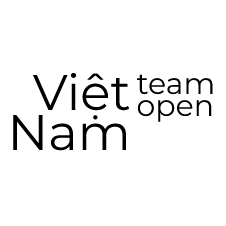
<style>
.page{position:relative;width:226px;height:226px;background:#ffffff}
.page>*{position:absolute;margin:0}
.t1{font:50px "Montserrat-Regular";color:#000000}
.t2{font:30px "Montserrat-Regular";color:#000000}
</style>
<div class="page">
<p class="t1" style="left:13px;top:72px;width:117px;height:79px;text-align:right">Việt<br>Nam</p>
<p class="t2" style="left:136px;top:74px;width:77px;height:48px">team<br><br>open</p>
</div>
